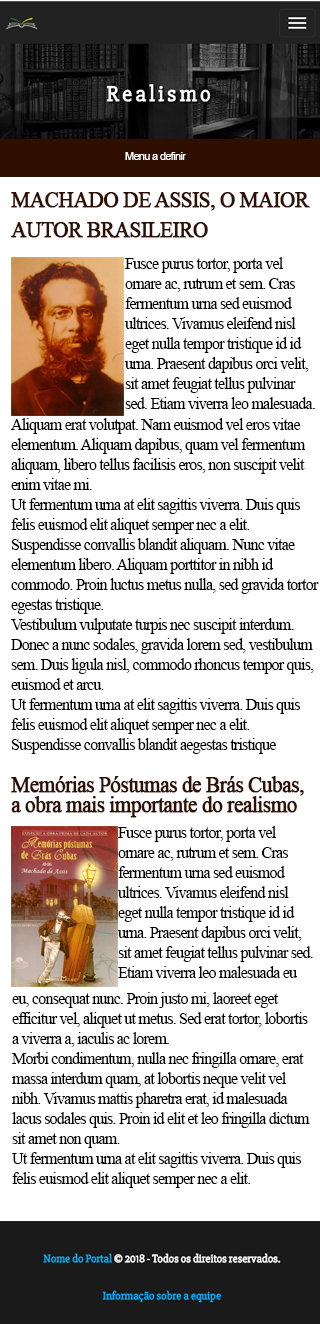
<style>
.page{position:relative;width:320px;height:1324px;background:#ffffff}
.page>*{position:absolute;margin:0}
.t1{font:11px "ArialMT";letter-spacing:-0.05em;color:#ffffff}
.t2{font:22px/30px "TimesNewRomanPSMT";letter-spacing:-0.05em;color:#2f0f01;font-weight:bold}
.t3{font:16.5px/20px "TimesNewRomanPSMT";letter-spacing:-0.05em;color:#000000}
.t4{font:22px/20px "TimesNewRomanPSMT";letter-spacing:-0.05em;color:#2f0f01;font-weight:bold}
</style>
<div class="page">
<p class="t1" style="left:125px;top:152px;width:62px;height:8px">Menu a definir</p>
<p class="t2" style="left:11px;top:192px;width:299px;height:46px">MACHADO DE ASSIS, O MAIOR AUTOR BRASILEIRO</p>
<p class="t3" style="left:125px;top:257px;width:190px;height:152px">Fusce purus tortor, porta vel ornare ac, rutrum et sem. Cras fermentum urna sed euismod ultrices. Vivamus eleifend nisl eget nulla tempor tristique id id urna. Praesent dapibus orci velit, sit amet feugiat tellus pulvinar sed. Etiam viverra leo malesuada.</p>
<p class="t3" style="left:11px;top:418px;width:308px;height:336px">Aliquam erat volutpat. Nam euismod vel eros vitae elementum. Aliquam dapibus, quam vel fermentum aliquam, libero tellus facilisis eros, non suscipit velit enim vitae mi.<br>Ut fermentum urna at elit sagittis viverra. Duis quis felis euismod elit aliquet semper nec a elit. Suspendisse convallis blandit aliquam. Nunc vitae elementum libero. Aliquam porttitor in nibh id commodo. Proin luctus metus nulla, sed gravida tortor egestas tristique. <br>Vestibulum vulputate turpis nec suscipit interdum. Donec a nunc sodales, gravida lorem sed, vestibulum sem. Duis ligula nisl, commodo rhoncus tempor quis, euismod et arcu. <br>Ut fermentum urna at elit sagittis viverra. Duis quis felis euismod elit aliquet semper nec a elit. Suspendisse convallis blandit aegestas tristique</p>
<p class="t4" style="left:11px;top:776px;width:293px;height:42px">Memórias Póstumas de Brás Cubas, a obra mais importante do realismo</p>
<p class="t3" style="left:118px;top:826px;width:195px;height:152px">Fusce purus tortor, porta vel ornare ac, rutrum et sem. Cras fermentum urna sed euismod ultrices. Vivamus eleifend nisl eget nulla tempor tristique id id urna. Praesent dapibus orci velit, sit amet feugiat tellus pulvinar sed. Etiam viverra leo malesuada eu</p>
<p class="t3" style="left:12px;top:992px;width:298px;height:196px">eu, consequat nunc. Proin justo mi, laoreet eget efficitur vel, aliquet ut metus. Sed erat tortor, lobortis a viverra a, iaculis ac lorem. <br>Morbi condimentum, nulla nec fringilla ornare, erat massa interdum quam, at lobortis neque velit vel nibh. Vivamus mattis pharetra erat, id malesuada lacus sodales quis. Proin id elit et leo fringilla dictum sit amet non quam. <br>Ut fermentum urna at elit sagittis viverra. Duis quis felis euismod elit aliquet semper nec a elit.</p>
</div>
